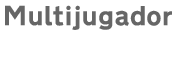
<style>
.page{position:relative;width:185px;height:70px;background:#ffffff}
.page>*{position:absolute;margin:0}
.t1{font:26px "Transport-Heavy-Regular";color:#666666}
</style>
<div class="page">
<p class="t1" style="left:5px;top:5px;width:167px;height:25px">Multijugador</p>
</div>
